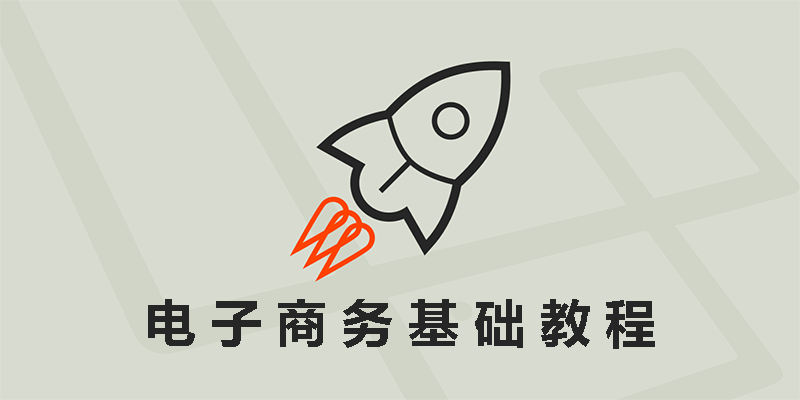
<style>
.page{position:relative;width:800px;height:400px;background:#d8dcd0}
.page>*{position:absolute;margin:0}
.t1{font:51.4px "MicrosoftYaHei-Bold";letter-spacing:0.28em;color:#262626}
</style>
<div class="page">
<p class="t1" style="left:148px;top:299px;width:507px;height:50px">电子商务基础教程</p>
</div>
